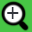
<style>
.page{position:relative;width:32px;height:32px;background:#47c545}
.page>*{position:absolute;margin:0}
.t1{font:24px "SegoeUI";color:#33363d}
</style>
<div class="page">
<p class="t1" style="left:7px;top:7px;width:12px;height:12px">+</p>
</div>
